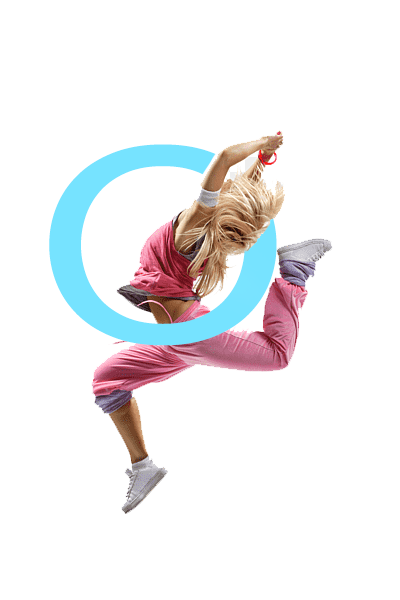
<style>
.page{position:relative;width:400px;height:600px;background:#ffffff}
.page>*{position:absolute;margin:0}
.t1{font:268.7px "HelveticaNeue";letter-spacing:0.14em;color:#76e3ff;scale:1.24 1}
</style>
<div class="page">
<p class="t1" style="left:49px;top:144px;width:228px;height:202px">O</p>
</div>
